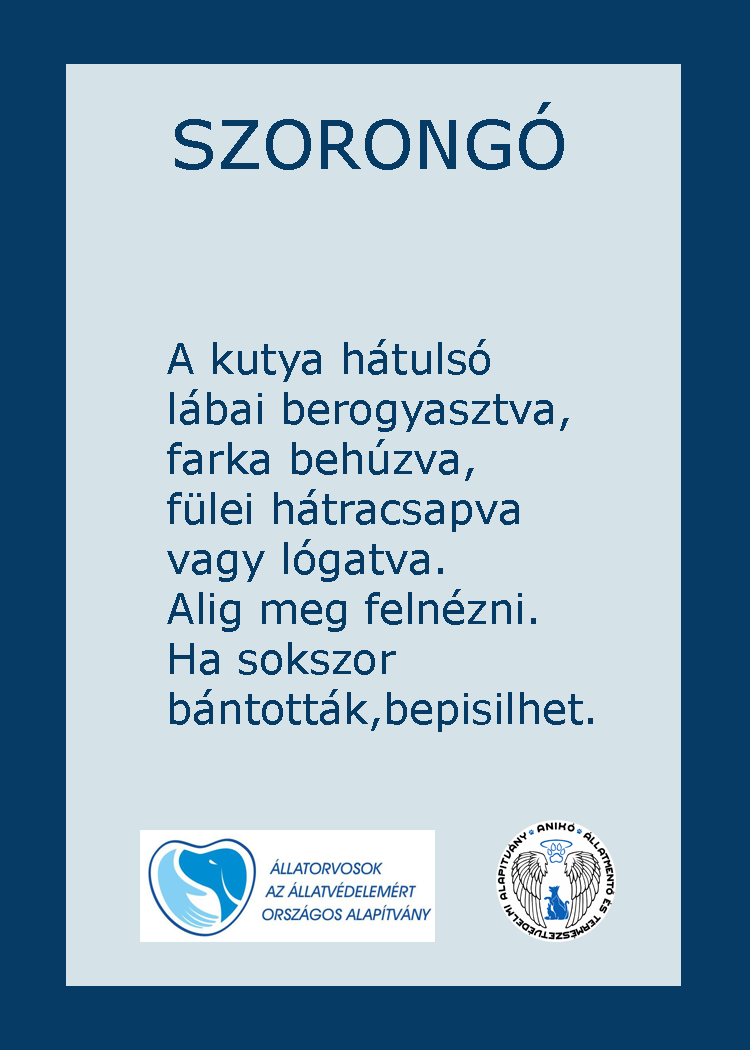
<style>
.page{position:relative;width:750px;height:1050px;background:#d5e2e7}
.page>*{position:absolute;margin:0}
.t1{font:66.7px "Verdana";color:#053b65}
.t2{font:66.7px "GravitateBRK";color:#053b65}
.t3{font:41.7px "Verdana";color:#053b65}
</style>
<div class="page">
<p class="t1" style="left:175px;top:102px;width:389px;height:68px"><span class="t2">         </span>SZORONGÓ</p>
<p class="t3" style="left:167px;top:339px;width:426px;height:393px">A kutya hátulsó<br>lábai berogyasztva,<br>farka behúzva,<br>fülei hátracsapva<br>vagy lógatva.<br>Alig meg felnézni.<br>Ha sokszor <br>bántották,bepisilhet.</p>
</div>
